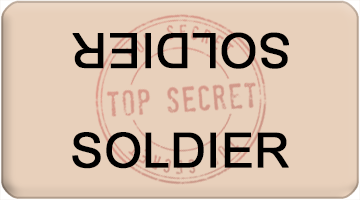
<style>
.page{position:relative;width:360px;height:200px;background:#e8d0bb}
.page>*{position:absolute;margin:0}
.t1{font:48px "ArialMT";color:#000000;font-weight:bold}
</style>
<div class="page">
<p class="t1" style="left:72px;top:32px;width:217px;height:37px;rotate:180deg">SOLDIER</p>
<p class="t1" style="left:72px;top:132px;width:217px;height:37px">SOLDIER</p>
</div>
